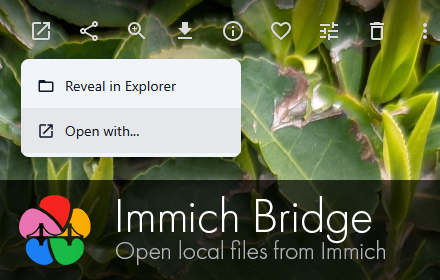
<style>
.page{position:relative;width:440px;height:280px}
.page>*{position:absolute;margin:0}
.t1{font:48.8px "FuturaPT-Light";color:#ffffff}
.t2{font:25.4px "FuturaPT-Light";color:#afb1b2}
</style>
<div class="page">
<p class="t1" style="left:118px;top:196px;width:254px;height:48px">Immich Bridge</p>
<p class="t2" style="left:116px;top:240px;width:269px;height:25px">Open local files from Immich</p>
</div>
